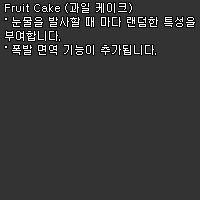
<style>
.page{position:relative;width:200px;height:200px;background:#333333}
.page>*{position:absolute;margin:0}
.t1{font:11px/14px "Dotum";color:#ffffff}
</style>
<div class="page">
<p class="t1" style="left:5px;top:3px;width:190px;height:52px">Fruit Cake (과일 케이크)<br>˚ 눈물을 발사할 때 마다 랜덤한 특성을<br>부여합니다.<br>˚ 폭발 면역 기능이 추가됩니다.</p>
</div>
